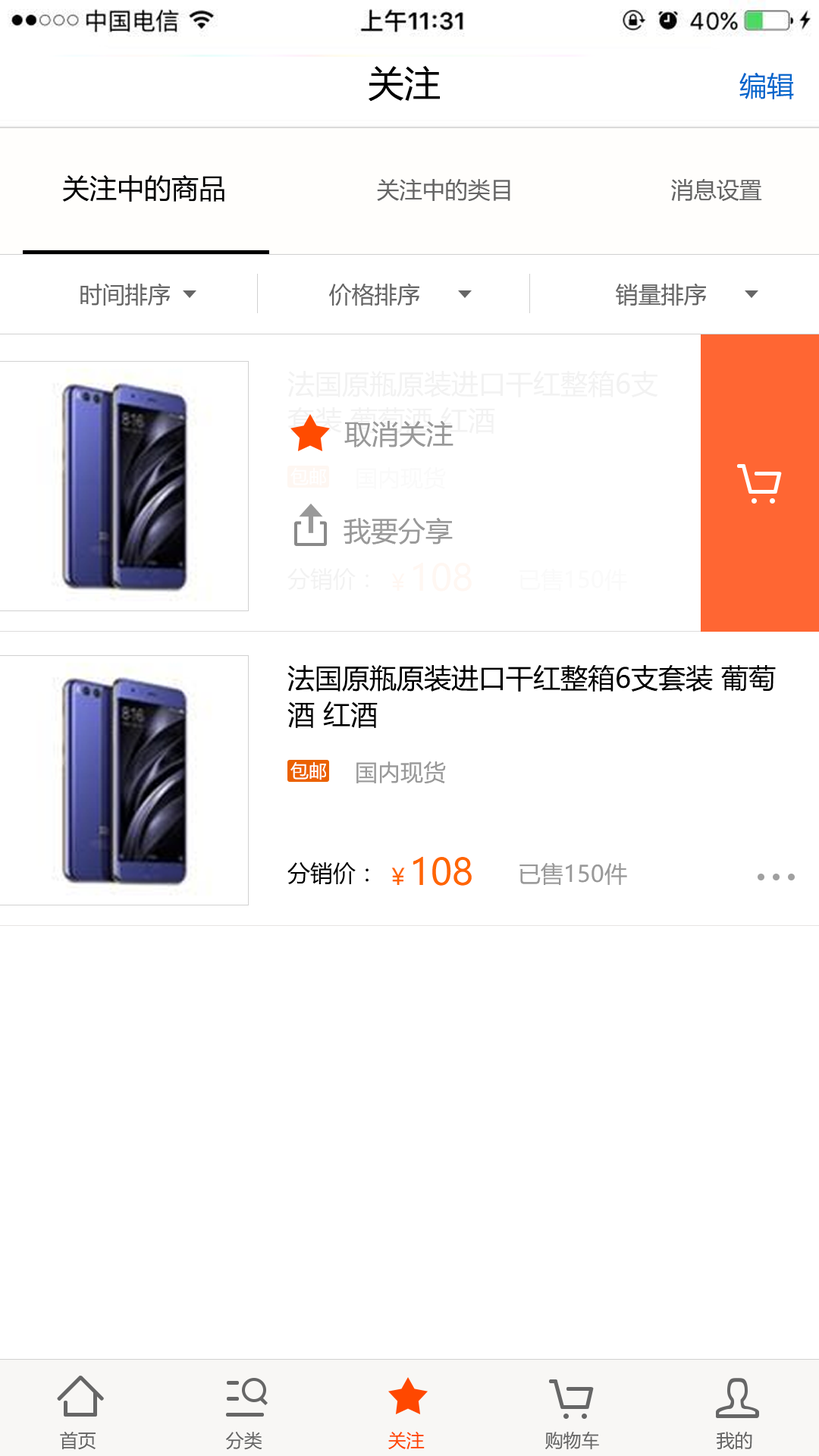
<style>
.page{position:relative;width:819px;height:1456px;background:#ffffff}
.page>*{position:absolute;margin:0}
.t1{font:36.4px "MicrosoftYaHei";color:#000000}
.t2{font:27.3px "MicrosoftYaHei";color:#0066cc}
.t3{font:27.3px "MicrosoftYaHei";color:#000000}
.t4{font:22.7px "MicrosoftYaHei";color:#666666}
.t5{font:27.3px/36.4px "MicrosoftYaHei";color:#f2f2f2}
.t6{font:27.3px "MicrosoftYaHei";color:#999999}
.t7{font:18.2px "MicrosoftYaHei";color:#ffffff}
.t8{font:22.7px "MicrosoftYaHei";color:#fafafa}
.t9{font:22.7px "MicrosoftYaHei";color:#f2f2f2}
.t10{font:36.4px "MicrosoftYaHei";color:#fff7f2}
.t11{font:22.7px "MicrosoftYaHei";color:#fff7f2}
.t12{font:27.3px/36.4px "MicrosoftYaHei";color:#000000}
.t13{font:22.7px "MicrosoftYaHei";color:#999999}
.t14{font:36.4px "MicrosoftYaHei";color:#ff6600}
.t15{font:22.7px "MicrosoftYaHei";color:#ff6600}
.t16{font:22.7px "MicrosoftYaHei";color:#000000}
.t17{font:18.2px "MicrosoftYaHei";color:#666666}
.t18{font:18.2px "MicrosoftYaHei";color:#ff4800}
</style>
<div class="page">
<p class="t1" style="left:369px;top:65px;width:71px;height:37px">关注</p>
<p class="t2" style="left:739px;top:73px;width:55px;height:26px">编辑</p>
<p class="t3" style="left:62px;top:175px;width:162px;height:27px">关注中的商品</p>
<p class="t4" style="left:377px;top:179px;width:133px;height:23px">关注中的类目</p>
<p class="t4" style="left:671px;top:179px;width:91px;height:22px">消息设置</p>
<p class="t4" style="left:80px;top:283px;width:90px;height:23px">时间排序</p>
<p class="t4" style="left:329px;top:283px;width:90px;height:23px">价格排序</p>
<p class="t4" style="left:616px;top:283px;width:90px;height:23px">销量排序</p>
<p class="t5" style="left:287px;top:371px;width:371px;height:63px">法国原瓶原装进口干红整箱6支套装 葡萄酒 红酒</p>
<p class="t6" style="left:344px;top:421px;width:109px;height:26px">取消关注</p>
<p class="t7" style="left:290px;top:468px;width:36px;height:18px">包邮</p>
<p class="t8" style="left:356px;top:467px;width:90px;height:23px">国内现货</p>
<p class="t6" style="left:344px;top:517px;width:109px;height:27px">我要分享</p>
<p class="t9" style="left:287px;top:568px;width:82px;height:22px">分销价：</p>
<p class="t10" style="left:391px;top:562px;width:81px;height:29px"><span class="t11">￥</span>108</p>
<p class="t8" style="left:519px;top:568px;width:108px;height:23px">已售150件</p>
<p class="t12" style="left:287px;top:665px;width:489px;height:63px">法国原瓶原装进口干红整箱6支套装 葡萄酒 红酒</p>
<p class="t13" style="left:356px;top:761px;width:90px;height:23px">国内现货</p>
<p class="t7" style="left:290px;top:762px;width:36px;height:18px">包邮</p>
<p class="t14" style="left:391px;top:856px;width:81px;height:30px"><span class="t15">￥</span>108</p>
<p class="t16" style="left:287px;top:862px;width:82px;height:22px">分销价：</p>
<p class="t13" style="left:519px;top:862px;width:108px;height:23px">已售150件</p>
<p class="t17" style="left:60px;top:1432px;width:36px;height:18px">首页</p>
<p class="t17" style="left:226px;top:1432px;width:36px;height:18px">分类</p>
<p class="t18" style="left:388px;top:1432px;width:37px;height:17px">关注</p>
<p class="t17" style="left:545px;top:1432px;width:54px;height:18px">购物车</p>
<p class="t17" style="left:717px;top:1432px;width:35px;height:17px">我的</p>
</div>
